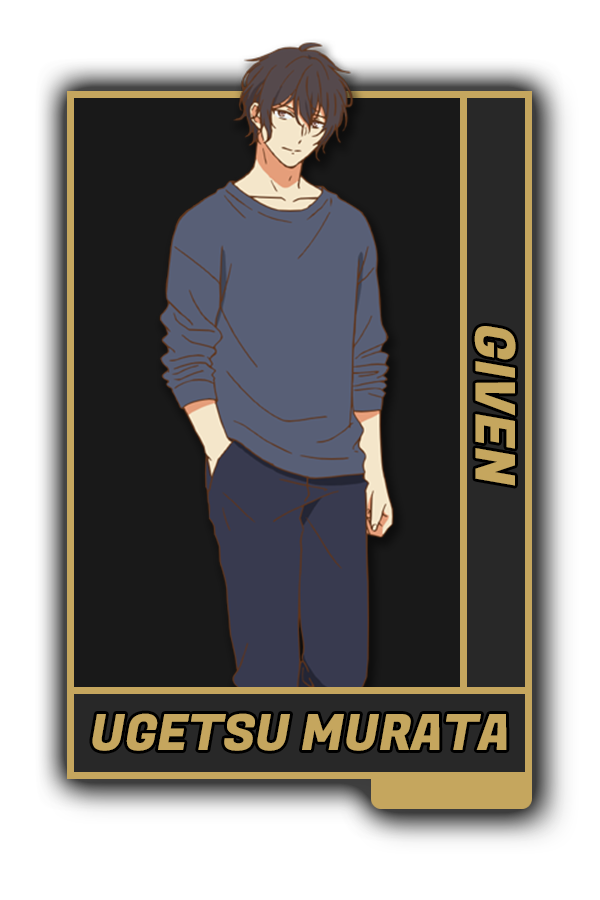
<style>
.page{position:relative;width:600px;height:900px;background:#191919}
.page>*{position:absolute;margin:0}
.t1{font:54.9px "FugazOne-Regular";color:#c5a65e}
.t2{font:49.9px "FugazOne-Regular";color:#c5a65e}
</style>
<div class="page">
<p class="t1" style="left:474px;top:326px;width:42px;height:160px;rotate:90deg">GIVEN</p>
<p class="t2" style="left:92px;top:713px;width:415px;height:38px">UGETSU MURATA</p>
</div>
